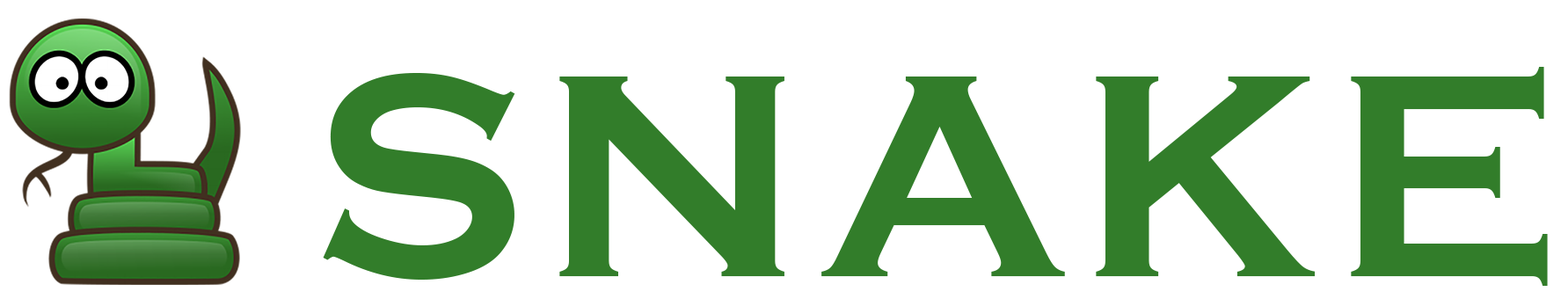
<style>
.page{position:relative;width:1568px;height:299px;background:#ffffff}
.page>*{position:absolute;margin:0}
.t1{font:299px "CopperplateGothic-Bold";letter-spacing:0.05em;color:#327d2a}
</style>
<div class="page">
<p class="t1" style="left:323px;top:67px;width:1225px;height:219px">SNAKE</p>
</div>
